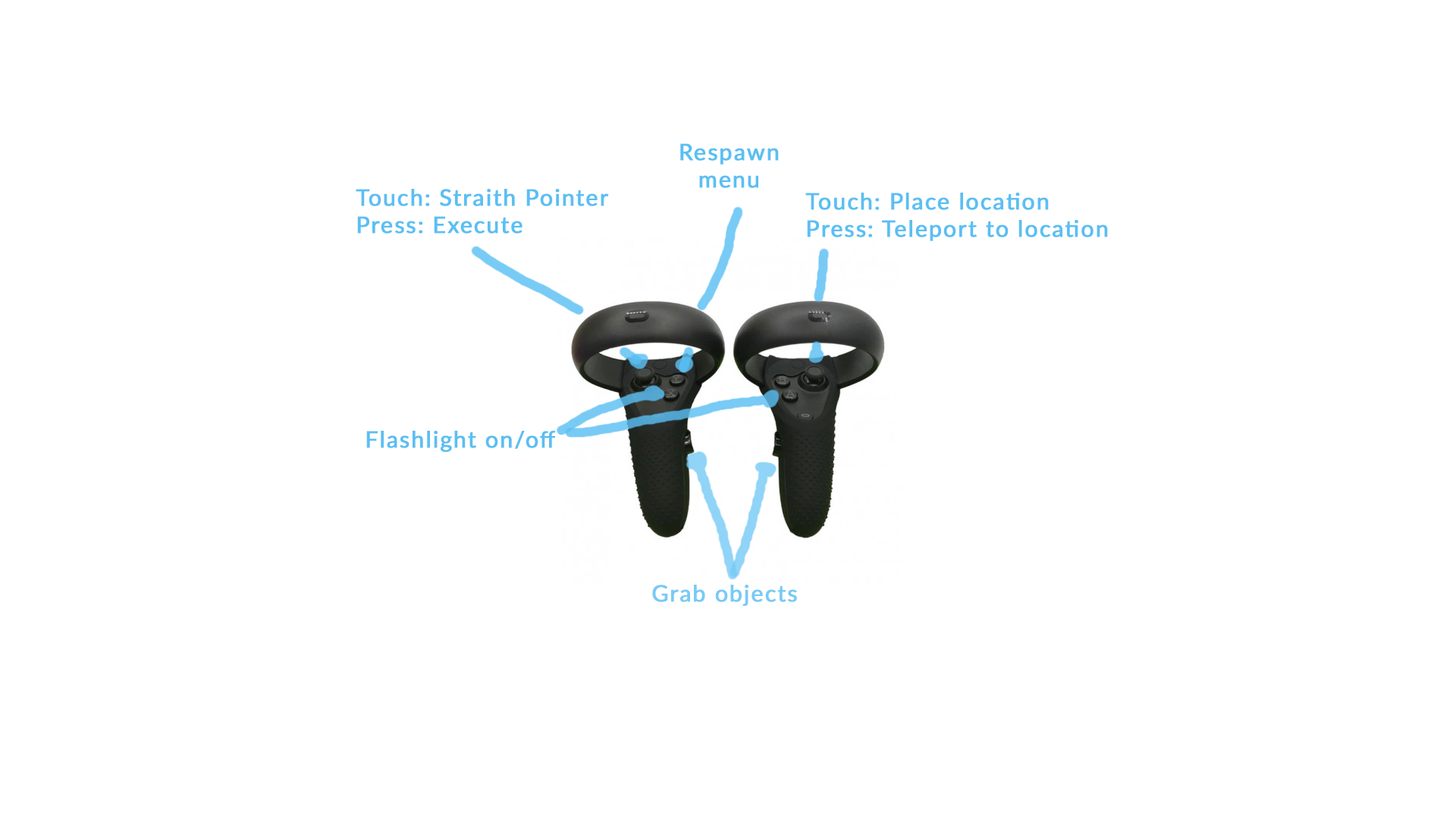
<style>
.page{position:relative;width:1456px;height:819px;background:#ffffff}
.page>*{position:absolute;margin:0}
.t1{font:22.7px "Lato-Regular";letter-spacing:0.05em;color:#5abff3;font-weight:bold}
.t2{font:22.7px "Lato-Regular";letter-spacing:0.05em;color:#78caf5;font-weight:bold}
</style>
<div class="page">
<p class="t1" style="left:680px;top:143px;width:99px;height:45px;text-align:center">Respawn<br>menu</p>
<p class="t1" style="left:356px;top:189px;width:253px;height:45px">Touch: Straith Pointer<br>Press: Execute</p>
<p class="t1" style="left:805px;top:193px;width:303px;height:48px">Touch: Place location<br>Press: Teleport to location</p>
<p class="t1" style="left:366px;top:431px;width:190px;height:21px">Flashlight on/off</p>
<p class="t2" style="left:652px;top:585px;width:145px;height:21px">Grab objects</p>
</div>
